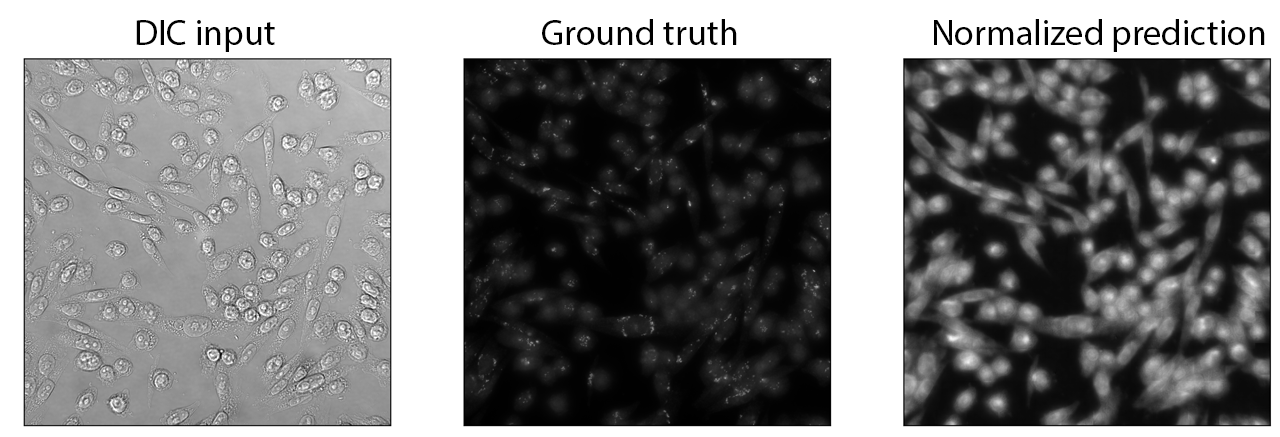
<style>
.page{position:relative;width:1280px;height:437px;background:#ffffff}
.page>*{position:absolute;margin:0}
.t1{font:36px "MyriadPro-Regular";color:#000000}
</style>
<div class="page">
<p class="t1" style="left:136px;top:20px;width:139px;height:32px">DIC input</p>
<p class="t1" style="left:542px;top:19px;width:195px;height:26px">Ground truth</p>
<p class="t1" style="left:934px;top:19px;width:331px;height:33px">Normalized prediction</p>
</div>
